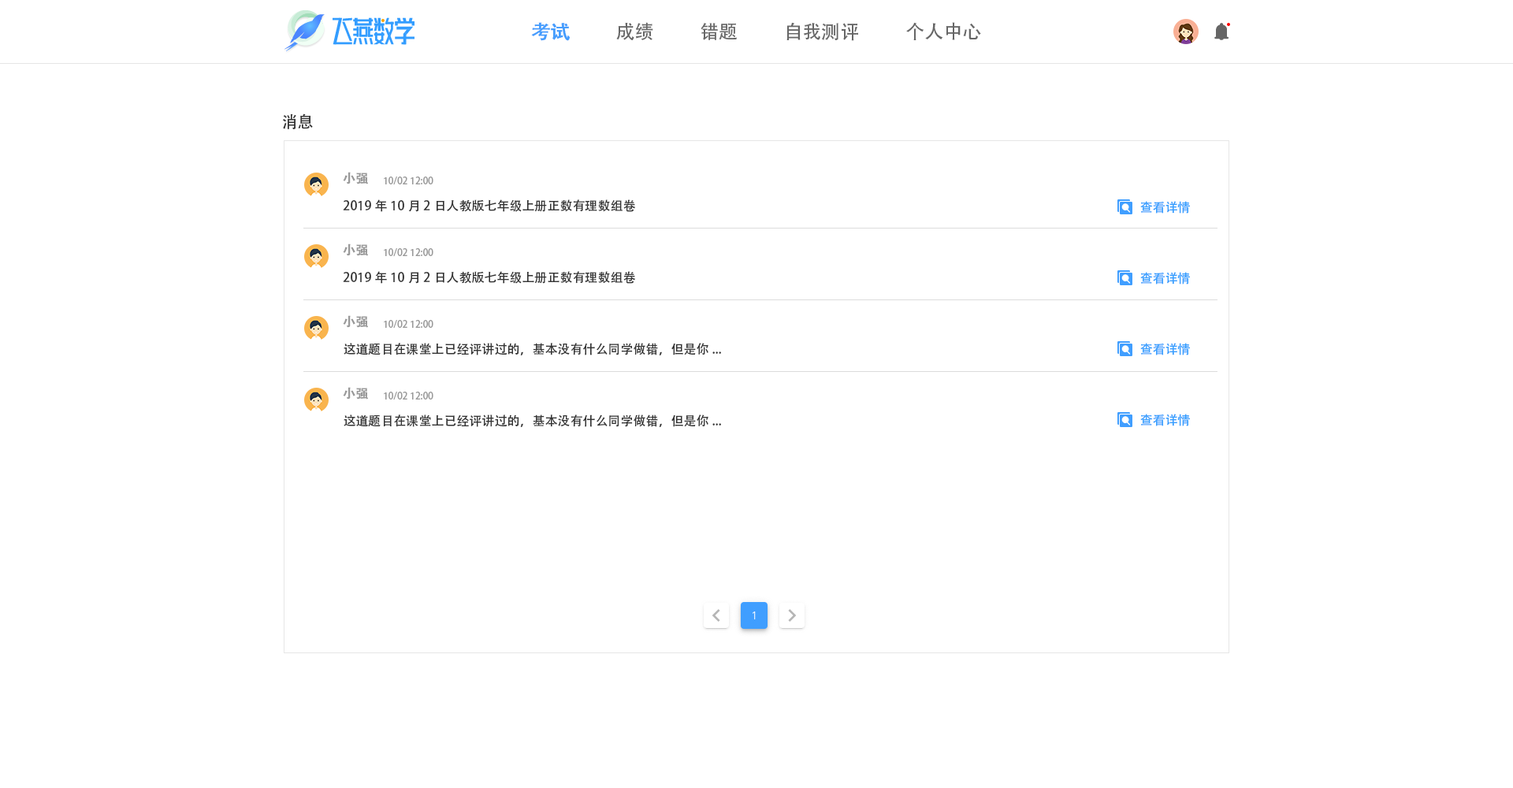
<style>
.page{position:relative;width:1513px;height:788px;background:#ffffff}
.page>*{position:absolute;margin:0}
.t1{font:18.9px "AdobeHeitiStd-Regular";color:#459dfd;font-weight:bold}
.t2{font:18.9px "AdobeHeitiStd-Regular";color:#666666}
.t3{font:15.8px "AdobeHeitiStd-Regular";color:#333333}
.t4{font:12.6px "AdobeHeitiStd-Regular";color:#999999;font-weight:bold}
.t5{font:9.5px "AdobeHeitiStd-Regular";color:#999999}
.t6{font:12.6px "AdobeHeitiStd-Regular";color:#333333}
.t7{font:12.6px "AdobeHeitiStd-Regular";color:#339dff}
</style>
<div class="page">
<p class="t1" style="left:531px;top:22px;width:39px;height:19px">考试</p>
<p class="t2" style="left:616px;top:22px;width:37px;height:18px">成绩</p>
<p class="t2" style="left:701px;top:23px;width:36px;height:17px">错题</p>
<p class="t2" style="left:786px;top:22px;width:72px;height:19px">自我测评</p>
<p class="t2" style="left:906px;top:22px;width:75px;height:18px">个人中心</p>
<p class="t3" style="left:283px;top:113px;width:30px;height:16px">消息</p>
<p class="t4" style="left:343px;top:172px;width:25px;height:12px">小强</p>
<p class="t5" style="left:384px;top:177px;width:49px;height:8px">10/02 12:00</p>
<p class="t6" style="left:343px;top:199px;width:292px;height:13px">2019年10月2日人教版七年级上册正数有理数组卷</p>
<p class="t7" style="left:1140px;top:201px;width:50px;height:13px">查看详情</p>
<p class="t4" style="left:343px;top:244px;width:25px;height:12px">小强</p>
<p class="t5" style="left:384px;top:248px;width:49px;height:9px">10/02 12:00</p>
<p class="t6" style="left:343px;top:271px;width:292px;height:13px">2019年10月2日人教版七年级上册正数有理数组卷</p>
<p class="t7" style="left:1140px;top:272px;width:50px;height:12px">查看详情</p>
<p class="t4" style="left:343px;top:315px;width:25px;height:13px">小强</p>
<p class="t5" style="left:384px;top:320px;width:49px;height:9px">10/02 12:00</p>
<p class="t6" style="left:344px;top:343px;width:377px;height:12px">这道题目在课堂上已经评讲过的，基本没有什么同学做错，但是你...</p>
<p class="t7" style="left:1140px;top:343px;width:50px;height:12px">查看详情</p>
<p class="t4" style="left:343px;top:387px;width:25px;height:13px">小强</p>
<p class="t5" style="left:384px;top:392px;width:49px;height:8px">10/02 12:00</p>
<p class="t7" style="left:1140px;top:414px;width:50px;height:12px">查看详情</p>
<p class="t6" style="left:344px;top:415px;width:377px;height:12px">这道题目在课堂上已经评讲过的，基本没有什么同学做错，但是你...</p>
</div>
